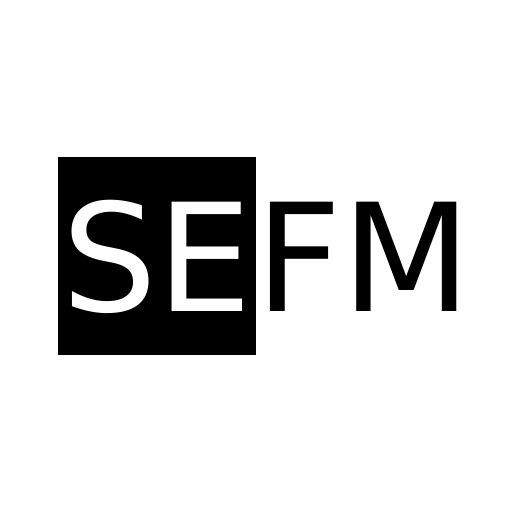
<style>
.page{position:relative;width:512px;height:512px;background:#ffffff}
.page>*{position:absolute;margin:0}
.t1{font:150px "DejaVuSans";color:#ffffff}
.t2{font:150px "DejaVuSans";color:#000000}
</style>
<div class="page">
<p class="t1" style="left:71px;top:199px;width:172px;height:115px">SE</p>
<p class="t2" style="left:269px;top:201px;width:188px;height:110px">FM</p>
</div>
